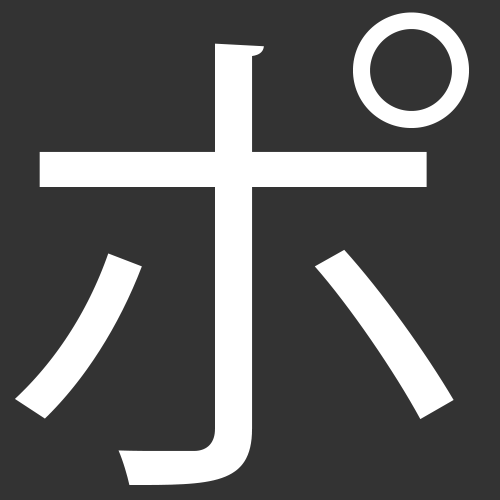
<style>
.page{position:relative;width:500px;height:500px;background:#333333}
.page>*{position:absolute;margin:0}
.t1{font:515.5px "KozGoPr6N-Regular";color:#ffffff}
</style>
<div class="page">
<p class="t1" style="left:15px;top:12px;width:455px;height:474px">ポ</p>
</div>
